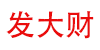
<style>
.page{position:relative;width:100px;height:50px;background:#ffffff}
.page>*{position:absolute;margin:0}
.t1{font:30px "AdobeHeitiStd-Regular";color:#ea0c0c}
</style>
<div class="page">
<p class="t1" style="left:6px;top:11px;width:88px;height:28px">发大财</p>
</div>
